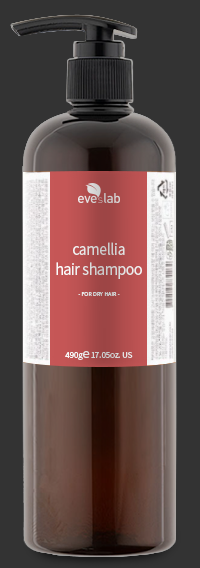
<style>
.page{position:relative;width:200px;height:568px;background:#333333}
.page>*{position:absolute;margin:0}
.t1{font:15px/20.5px "NotoSansKR-Regular";letter-spacing:-0.025em;color:#dbdbdb;scale:0.94 1}
.t2{font:5.5px "NotoSansKR-Regular";color:#d1d1d1}
.t3{font:8.2px "NotoSansKR-Regular";letter-spacing:-0.025em}
.t4{font:12.3px "NotoSansKR-Regular";letter-spacing:-0.025em}
</style>
<div class="page">
<p class="t1" style="left:56px;top:242px;width:86px;height:37px;text-align:center">camellia<br>hair shampoo</p>
<p class="t2" style="left:78px;top:292px;width:42px;height:4px">- FOR DRY HAIR -</p>
<p class="t3" style="left:65px;top:351px;width:68px;height:9px">490g<span class="t4">e</span> 17.05oz. US</p>
</div>
